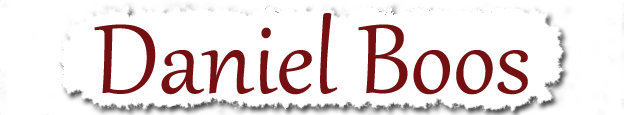
<style>
.page{position:relative;width:624px;height:115px;background:#ffffff}
.page>*{position:absolute;margin:0}
.t1{font:120px "Gabriola";color:#741012}
</style>
<div class="page">
<p class="t1" style="left:94px;top:13px;width:434px;height:82px">Daniel Boos</p>
</div>
